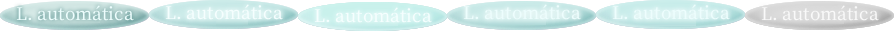
<style>
.page{position:relative;width:894px;height:31px;background:#ffffff}
.page>*{position:absolute;margin:0}
.t1{font:21px "OfficialFateFont-Medium";color:#edfdfd}
.t2{font:21px "OfficialFateFont-Medium";color:#f5fefe}
.t3{font:21px "OfficialFateFont-Medium";color:#f9f9f9}
</style>
<div class="page">
<p class="t1" style="left:16px;top:5px;width:118px;height:16px">L. automática</p>
<p class="t2" style="left:165px;top:4px;width:118px;height:16px">L. automática</p>
<p class="t1" style="left:463px;top:4px;width:118px;height:16px">L. automática</p>
<p class="t1" style="left:612px;top:4px;width:118px;height:16px">L. automática</p>
<p class="t3" style="left:761px;top:5px;width:118px;height:16px">L. automática</p>
<p class="t2" style="left:314px;top:7px;width:118px;height:16px">L. automática</p>
</div>
